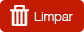
<style>
.page{position:relative;width:84px;height:32px;background:#c21b00}
.page>*{position:absolute;margin:0}
.t1{font:13px "Helvetica-Light";letter-spacing:-0.025em;color:#fefefe}
</style>
<div class="page">
<p class="t1" style="left:34px;top:12px;width:39px;height:12px">Limpar</p>
</div>
